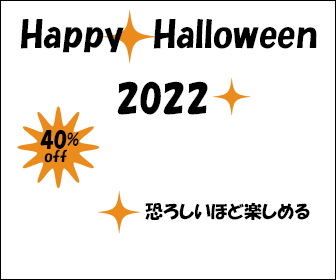
<style>
.page{position:relative;width:336px;height:280px;background:#ffffff}
.page>*{position:absolute;margin:0}
.t1{font:36px "HGSSoeiKakupoptai";color:#000000}
.t2{font:21px "HGSSoeiKakupoptai";color:#000000}
.t3{font:18px "HGSSoeiKakupoptai";color:#000000}
.t4{font:15.2px "HGSSoeiKakupoptai";color:#000000}
.t5{font:18px "HGPSoeiKakupoptai";color:#000000}
</style>
<div class="page">
<p class="t1" style="left:20px;top:19px;width:297px;height:96px">Happy Halloween <br>        2022</p>
<p class="t2" style="left:40px;top:129px;width:39px;height:20px">40<span class="t3">%</span></p>
<p class="t4" style="left:44px;top:149px;width:23px;height:14px">off</p>
<p class="t5" style="left:145px;top:202px;width:165px;height:18px">恐ろしいほど楽しめる</p>
</div>
